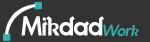
<style>
.page{position:relative;width:150px;height:42px;background:#333333}
.page>*{position:absolute;margin:0}
.t1{font:27.2px "BechtlersRegular";color:#ffffff}
.t2{font:16.1px "Bechtlers-Italic";color:#2fb4ae}
</style>
<div class="page">
<p class="t1" style="left:21px;top:16px;width:83px;height:20px">Mikdad</p>
<p class="t2" style="left:103px;top:24px;width:36px;height:13px">Work</p>
</div>
